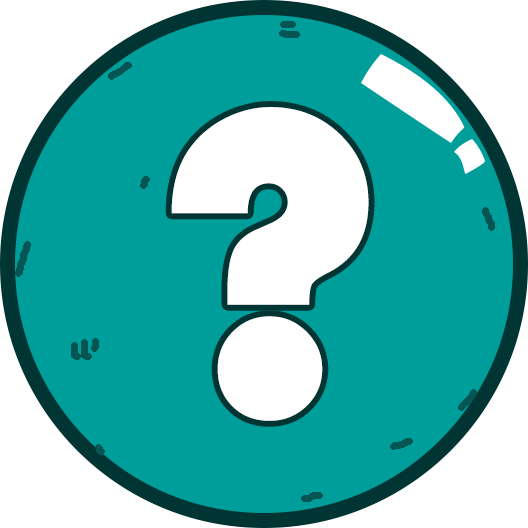
<style>
.page{position:relative;width:528px;height:528px;background:#009e9a}
.page>*{position:absolute;margin:0}
.t1{font:450px "Bauhaus93";color:#ffffff}
</style>
<div class="page">
<p class="t1" style="left:171px;top:107px;width:198px;height:314px">?</p>
</div>
